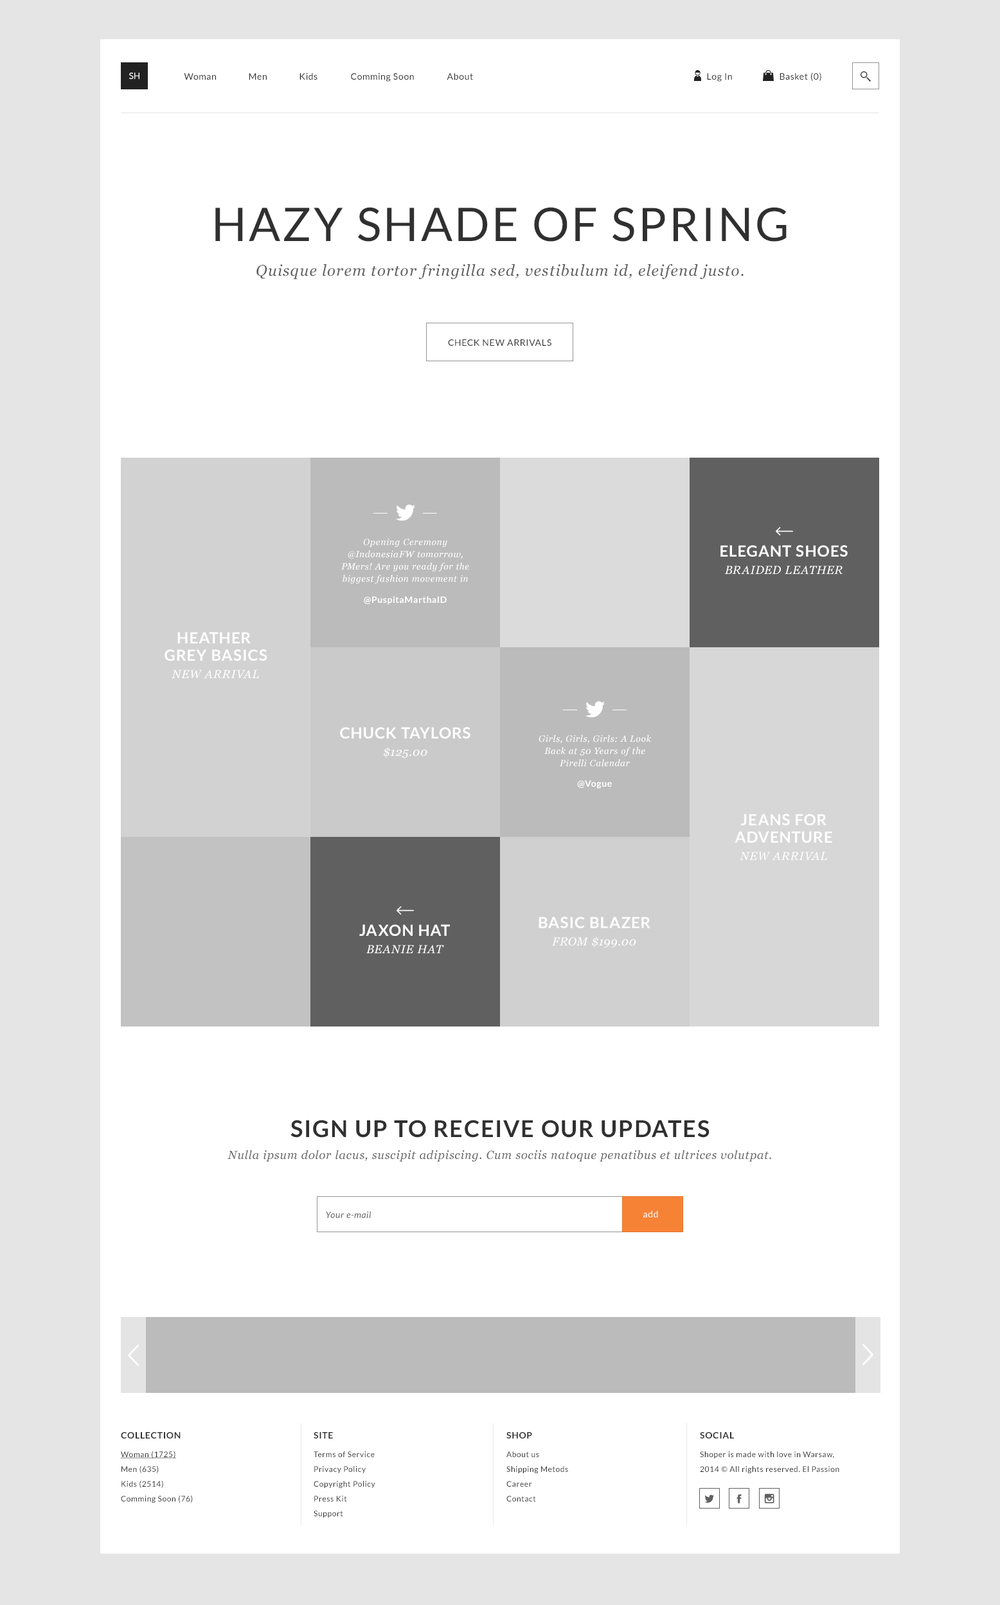
<style>
.page{position:relative;width:1000px;height:1605px;background:#ffffff}
.page>*{position:absolute;margin:0}
.t1{font:9px "Lato-Regular";color:#ffffff;text-transform:uppercase}
.t2{font:9px "Lato-Regular";letter-spacing:0.05em;color:#303030}
.t3{font:46.3px "Lato-Regular";letter-spacing:0.05em;color:#303030;text-transform:uppercase}
.t4{font:15.4px "Georgia-Italic";letter-spacing:0.05em;color:#606060}
.t5{font:9px "Lato-Regular";letter-spacing:0.05em;color:#303030;text-transform:uppercase}
.t6{font:9px/12.2px "Georgia-Italic";letter-spacing:0.05em;color:#ffffff}
.t7{font:11.6px/17.4px "Georgia-Italic";letter-spacing:0.05em;color:#ffffff;text-transform:uppercase}
.t8{font:15.4px/17.4px "Lato-Bold";letter-spacing:0.05em;color:#ffffff;text-transform:uppercase}
.t9{font:9px "Lato-Bold";letter-spacing:0.05em;color:#ffffff}
.t10{font:23.1px "Lato-Bold";letter-spacing:0.05em;color:#303030;text-transform:uppercase}
.t11{font:11.6px "Georgia-Italic";letter-spacing:0.05em;color:#606060}
.t12{font:9px "Lato-Italic";letter-spacing:0.05em;color:#606060}
.t13{font:9px "Lato-Regular";letter-spacing:0.05em;color:#ffffff}
.t14{font:9px "Lato-Bold";letter-spacing:0.05em;color:#303030;text-transform:uppercase}
.t15{font:7.7px/14.8px "Lato-Regular";letter-spacing:0.05em;color:#303030}
.t16{font:7.7px/14.8px "Lato-Regular";letter-spacing:0.05em;color:#303030;text-decoration:underline}
</style>
<div class="page">
<p class="t1" style="left:129px;top:73px;width:11px;height:6px">sh</p>
<p class="t2" style="left:184px;top:73px;width:32px;height:7px">Woman</p>
<p class="t2" style="left:249px;top:73px;width:18px;height:7px">Men</p>
<p class="t2" style="left:300px;top:73px;width:18px;height:7px">Kids</p>
<p class="t2" style="left:351px;top:73px;width:63px;height:9px">Comming Soon</p>
<p class="t2" style="left:447px;top:73px;width:26px;height:7px">About</p>
<p class="t2" style="left:707px;top:73px;width:25px;height:9px">Log In</p>
<p class="t2" style="left:780px;top:73px;width:42px;height:8px">Basket (0)</p>
<p class="t3" style="left:215px;top:207px;width:572px;height:35px">Hazy Shade of spring</p>
<p class="t4" style="left:256px;top:264px;width:488px;height:16px">Quisque lorem tortor fringilla sed, vestibulum id, eleifend justo.</p>
<p class="t5" style="left:448px;top:339px;width:104px;height:7px">check new arrivals</p>
<p class="t6" style="left:341px;top:538px;width:128px;height:46px;text-align:center">Opening Ceremony @IndonesiaFW tomorrow, PMers! Are you ready for the biggest fashion movement in Indonesia? #infoPM pic.twitter.com/3VQvwt4diJ</p>
<p class="t7" style="left:721px;top:545px;width:127px;height:29px;text-align:center"><span class="t8">elegant shoes<br></span>BRAIDED LEATHER</p>
<p class="t9" style="left:364px;top:596px;width:83px;height:9px">@PuspitaMarthaID</p>
<p class="t8" style="left:165px;top:632px;width:102px;height:47px;text-align:center">HEATHER <br>GREY BASICS<br><span class="t7">New Arrival</span></p>
<p class="t8" style="left:340px;top:727px;width:131px;height:32px;text-align:center">chuck taylors<br><span class="t7">$125.00</span></p>
<p class="t6" style="left:539px;top:735px;width:112px;height:32px;text-align:center">Girls, Girls, Girls: A Look Back at 50 Years of the Pirelli Calendar</p>
<p class="t9" style="left:577px;top:780px;width:35px;height:9px">@Vogue</p>
<p class="t8" style="left:735px;top:814px;width:98px;height:47px;text-align:center">jeans for<br>ADVENTURE<br><span class="t7">New Arrival</span></p>
<p class="t8" style="left:539px;top:917px;width:112px;height:31px;text-align:center">basic blazer<br><span class="t7">from $199.00</span></p>
<p class="t7" style="left:359px;top:924px;width:91px;height:29px;text-align:center"><span class="t8">Jaxon Hat<br></span>Beanie Hat</p>
<p class="t10" style="left:291px;top:1120px;width:419px;height:18px">sign up to receive our updates</p>
<p class="t11" style="left:228px;top:1150px;width:543px;height:12px">Nulla ipsum dolor lacus, suscipit adipiscing. Cum sociis natoque penatibus et ultrices volutpat.</p>
<p class="t12" style="left:326px;top:1211px;width:45px;height:7px">Your e-mail</p>
<p class="t13" style="left:644px;top:1210px;width:14px;height:8px">add</p>
<p class="t14" style="left:121px;top:1432px;width:60px;height:7px">Collection</p>
<p class="t14" style="left:314px;top:1432px;width:19px;height:7px">site</p>
<p class="t14" style="left:507px;top:1432px;width:25px;height:7px">Shop</p>
<p class="t14" style="left:700px;top:1432px;width:34px;height:7px">social</p>
<p class="t15" style="left:120px;top:1451px;width:73px;height:52px"><span class="t16">Woman (1725)<br></span>Men (635)<br>Kids (2514)<br>Comming Soon (76)</p>
<p class="t15" style="left:314px;top:1452px;width:61px;height:66px">Terms of Service <br>Privacy Policy <br>Copyright Policy <br>Press Kit <br>Support</p>
<p class="t15" style="left:507px;top:1452px;width:61px;height:50px">About us<br>Shipping Metods<br>Career<br>Contact</p>
<p class="t15" style="left:700px;top:1452px;width:140px;height:21px">Shoper is made with love in Warsaw, <br>2014 © All rights reserved. El Passion</p>
</div>
